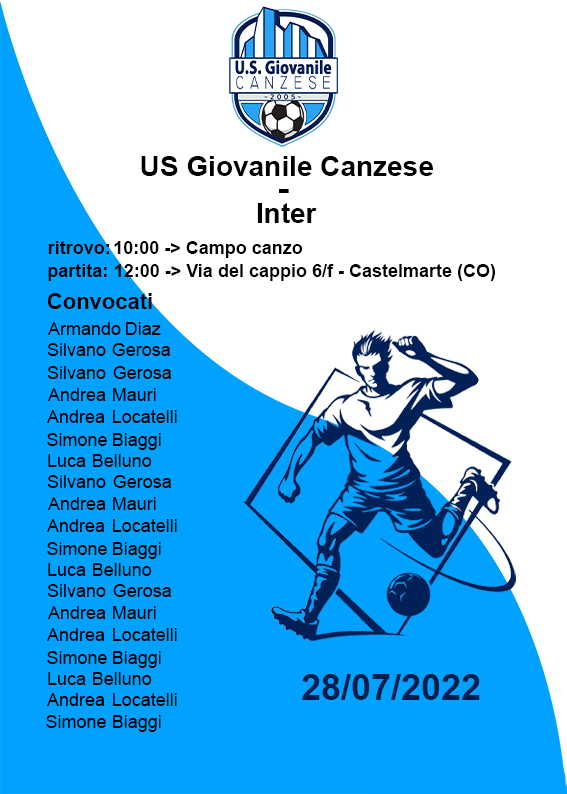
<style>
.page{position:relative;width:567px;height:794px;background:#00a1ff}
.page>*{position:absolute;margin:0}
.t1{font:28px "Arial-BoldMT";color:#000000}
.t2{font:36px "Arial-BoldMT";color:#000000}
.t3{font:18px "Arial-BoldMT";color:#000000}
.t4{font:22px "Arial-BoldMT";color:#000000}
.t5{font:18px "ArialMT";color:#000000}
.t6{font:36px "Arial-BoldMT";color:#001d4c}
</style>
<div class="page">
<p class="t1" style="left:141px;top:156px;width:292px;height:20px">US Giovanile Canzese</p>
<p class="t2" style="left:279px;top:189px;width:10px;height:4px">-</p>
<p class="t1" style="left:257px;top:203px;width:60px;height:20px">Inter</p>
<p class="t3" style="left:48px;top:241px;width:61px;height:13px">ritrovo:</p>
<p class="t3" style="left:114px;top:241px;width:189px;height:17px">10:00 -&gt; Campo canzo</p>
<p class="t3" style="left:48px;top:264px;width:59px;height:17px">partita:</p>
<p class="t3" style="left:115px;top:264px;width:380px;height:17px">12:00 -&gt; Via del cappio 6/f - Castelmarte (CO)</p>
<p class="t4" style="left:47px;top:293px;width:105px;height:16px">Convocati</p>
<p class="t5" style="left:47px;top:322px;width:74px;height:13px">Armando</p>
<p class="t5" style="left:126px;top:322px;width:35px;height:13px">Diaz</p>
<p class="t5" style="left:47px;top:343px;width:59px;height:13px">Silvano</p>
<p class="t5" style="left:112px;top:343px;width:58px;height:13px">Gerosa</p>
<p class="t5" style="left:47px;top:366px;width:59px;height:13px">Silvano</p>
<p class="t5" style="left:113px;top:366px;width:58px;height:13px">Gerosa</p>
<p class="t5" style="left:47px;top:388px;width:59px;height:13px">Andrea</p>
<p class="t5" style="left:113px;top:388px;width:43px;height:13px">Mauri</p>
<p class="t5" style="left:46px;top:410px;width:59px;height:13px">Andrea</p>
<p class="t5" style="left:113px;top:410px;width:64px;height:13px">Locatelli</p>
<p class="t5" style="left:47px;top:433px;width:60px;height:13px">Simone</p>
<p class="t5" style="left:113px;top:433px;width:48px;height:17px">Biaggi</p>
<p class="t5" style="left:48px;top:454px;width:38px;height:13px">Luca</p>
<p class="t5" style="left:93px;top:454px;width:59px;height:13px">Belluno</p>
<p class="t5" style="left:47px;top:475px;width:59px;height:13px">Silvano</p>
<p class="t5" style="left:113px;top:475px;width:58px;height:13px">Gerosa</p>
<p class="t5" style="left:47px;top:497px;width:59px;height:13px">Andrea</p>
<p class="t5" style="left:113px;top:497px;width:43px;height:13px">Mauri</p>
<p class="t5" style="left:46px;top:519px;width:59px;height:13px">Andrea</p>
<p class="t5" style="left:113px;top:519px;width:64px;height:13px">Locatelli</p>
<p class="t5" style="left:47px;top:542px;width:60px;height:13px">Simone</p>
<p class="t5" style="left:113px;top:542px;width:48px;height:17px">Biaggi</p>
<p class="t5" style="left:48px;top:563px;width:38px;height:13px">Luca</p>
<p class="t5" style="left:93px;top:563px;width:59px;height:13px">Belluno</p>
<p class="t5" style="left:47px;top:584px;width:59px;height:13px">Silvano</p>
<p class="t5" style="left:113px;top:584px;width:58px;height:13px">Gerosa</p>
<p class="t5" style="left:47px;top:606px;width:59px;height:13px">Andrea</p>
<p class="t5" style="left:113px;top:606px;width:43px;height:13px">Mauri</p>
<p class="t5" style="left:46px;top:628px;width:59px;height:13px">Andrea</p>
<p class="t5" style="left:113px;top:628px;width:64px;height:13px">Locatelli</p>
<p class="t5" style="left:47px;top:651px;width:60px;height:13px">Simone</p>
<p class="t5" style="left:113px;top:651px;width:48px;height:17px">Biaggi</p>
<p class="t5" style="left:48px;top:672px;width:38px;height:13px">Luca</p>
<p class="t5" style="left:93px;top:672px;width:59px;height:13px">Belluno</p>
<p class="t6" style="left:302px;top:674px;width:178px;height:26px">28/07/2022</p>
<p class="t5" style="left:46px;top:693px;width:59px;height:13px">Andrea</p>
<p class="t5" style="left:113px;top:693px;width:64px;height:13px">Locatelli</p>
<p class="t5" style="left:46px;top:715px;width:60px;height:13px">Simone</p>
<p class="t5" style="left:113px;top:715px;width:48px;height:17px">Biaggi</p>
</div>
